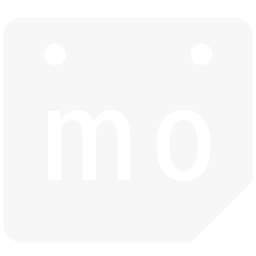
<style>
.page{position:relative;width:256px;height:256px;background:#f7f7f7}
.page>*{position:absolute;margin:0}
.t1{font:130px "RobotoCondensed-Regular";letter-spacing:0.13em;color:#ffffff}
</style>
<div class="page">
<p class="t1" style="left:48px;top:110px;width:163px;height:71px">mo</p>
</div>
